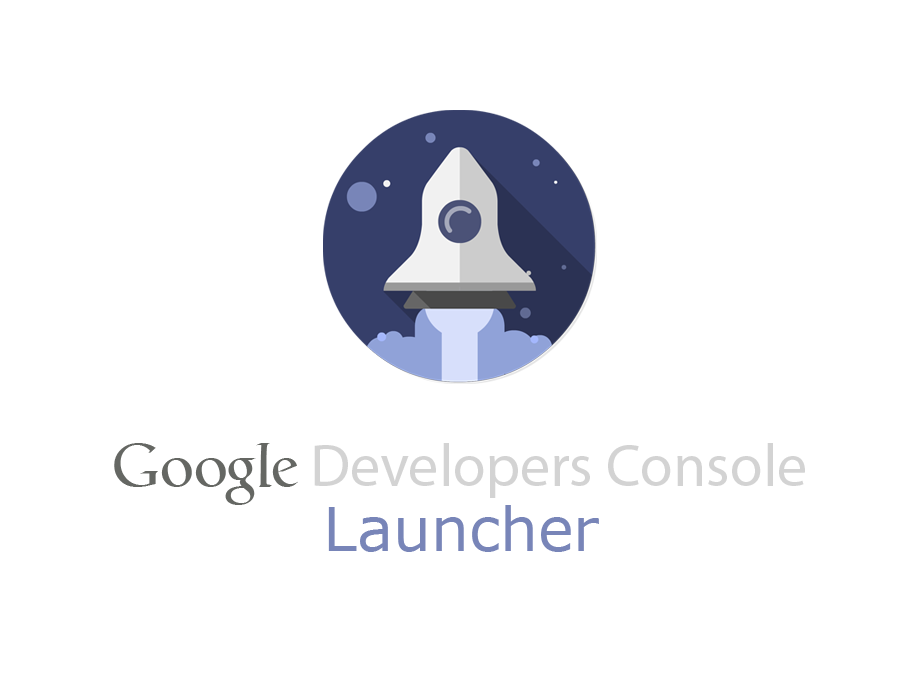
<style>
.page{position:relative;width:920px;height:680px;background:#ffffff}
.page>*{position:absolute;margin:0}
.t1{font:60px "MyriadPro-Regular";color:#d3d3d3}
.t2{font:60px "Catull";color:#656763}
.t3{font:60px "Verdana";color:#7885b8}
</style>
<div class="page">
<p class="t1" style="left:114px;top:443px;width:691px;height:62px"><span class="t2">Google </span>Developers Console</p>
<p class="t3" style="left:328px;top:505px;width:271px;height:47px">Launcher</p>
</div>
